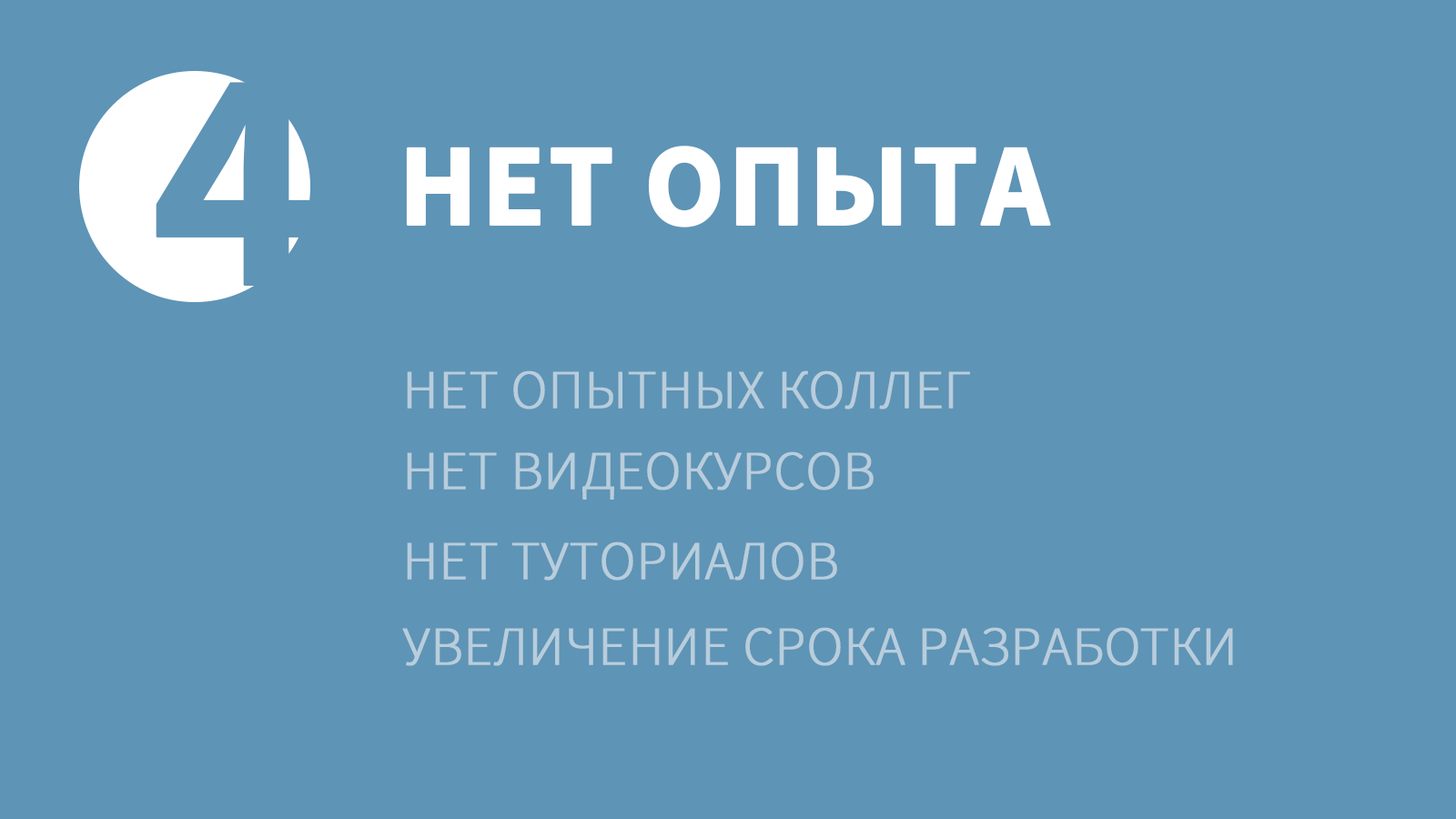
<style>
.page{position:relative;width:1456px;height:819px;background:#5e94b6}
.page>*{position:absolute;margin:0}
.t1{font:317.8px "SourceSansPro-Bold";color:#5e94b6;text-transform:uppercase;font-weight:bold}
.t2{font:117.8px "SourceSansPro-Bold";color:#ffffff;text-transform:uppercase;font-weight:bold}
.t3{font:54.6px "SourceSansPro-Light";color:#b8cddc;text-transform:uppercase;font-weight:bold}
</style>
<div class="page">
<p class="t1" style="left:156px;top:82px;width:156px;height:204px">4</p>
<p class="t2" style="left:406px;top:146px;width:645px;height:81px">нет опыта</p>
<p class="t3" style="left:407px;top:370px;width:563px;height:39px">Нет опытных коллег</p>
<p class="t3" style="left:407px;top:451px;width:467px;height:49px">Нет видеокурсов</p>
<p class="t3" style="left:407px;top:541px;width:430px;height:40px">Нет туториалов</p>
<p class="t3" style="left:402px;top:627px;width:831px;height:39px">Увеличение срока разработки</p>
</div>
